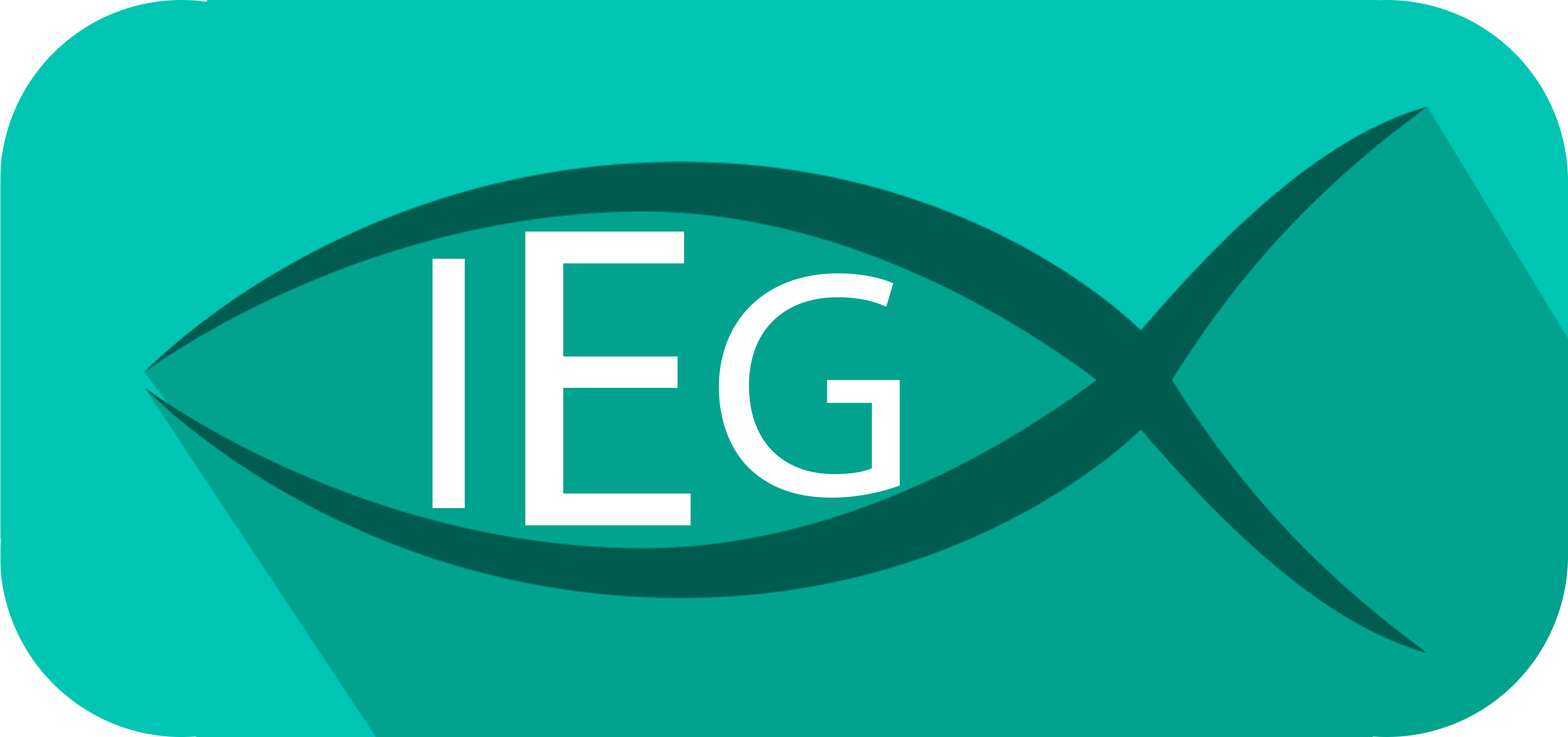
<style>
.page{position:relative;width:1568px;height:737px;background:#02a38e}
.page>*{position:absolute;margin:0}
.t1{font:435.8px "MyriadPro-Regular";color:#ffffff}
.t2{font:370.5px "MyriadPro-Regular";color:#ffffff}
</style>
<div class="page">
<p class="t1" style="left:525px;top:232px;width:166px;height:294px">E</p>
<p class="t2" style="left:433px;top:259px;width:32px;height:249px">I</p>
</div>
